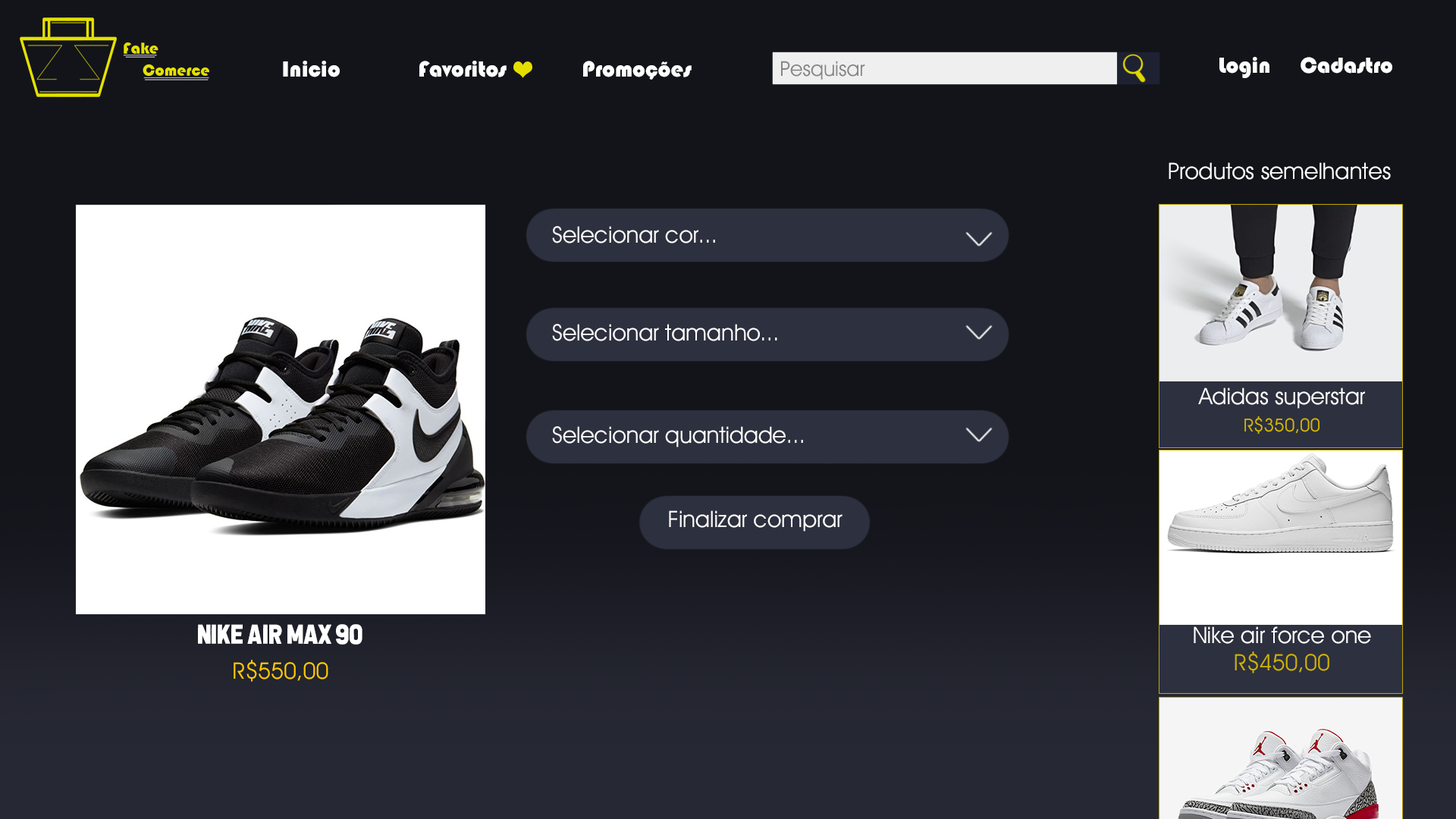
<style>
.page{position:relative;width:1456px;height:819px;background:#13141a}
.page>*{position:absolute;margin:0}
.t1{font:22.7px "Bauhaus93";color:#ffffff}
.t2{font:22.7px "Decker-Regular";color:#ffffff}
.t3{font:22.7px/60.7px "Decker-Regular";color:#ffffff}
.t4{font:18.2px/27.3px "Decker-Regular";color:#d3b700}
.t5{font:27.3px "AlltheWaytotheSun";color:#ffffff}
.t6{font:22.7px/27.3px "Decker-Regular";color:#ceb200}
.t7{font:22.7px "Decker-Regular";color:#ffcc00}
</style>
<div class="page">
<p class="t1" style="left:283px;top:61px;width:409px;height:19px">Inicio   Favoritos   Promoções</p>
<p class="t1" style="left:1219px;top:57px;width:173px;height:21px">Login  Cadastro</p>
<p class="t2" style="left:1169px;top:162px;width:222px;height:18px">Produtos semelhantes</p>
<p class="t2" style="left:552px;top:226px;width:163px;height:17px">Selecionar cor...</p>
<p class="t2" style="left:552px;top:324px;width:225px;height:17px">Selecionar tamanho...</p>
<p class="t3" style="left:1198px;top:388px;width:167px;height:46px;text-align:center">Adidas superstar<br><span class="t4">R$350,00</span></p>
<p class="t2" style="left:552px;top:426px;width:251px;height:21px">Selecionar quantidade...</p>
<p class="t2" style="left:669px;top:510px;width:173px;height:22px">Finalizar comprar</p>
<p class="t5" style="left:198px;top:624px;width:164px;height:21px">Nike air max 90</p>
<p class="t3" style="left:1194px;top:626px;width:177px;height:47px;text-align:center">Nike air force one<br><span class="t6">R$450,00</span></p>
<p class="t7" style="left:234px;top:660px;width:94px;height:22px">R$550,00</p>
</div>
